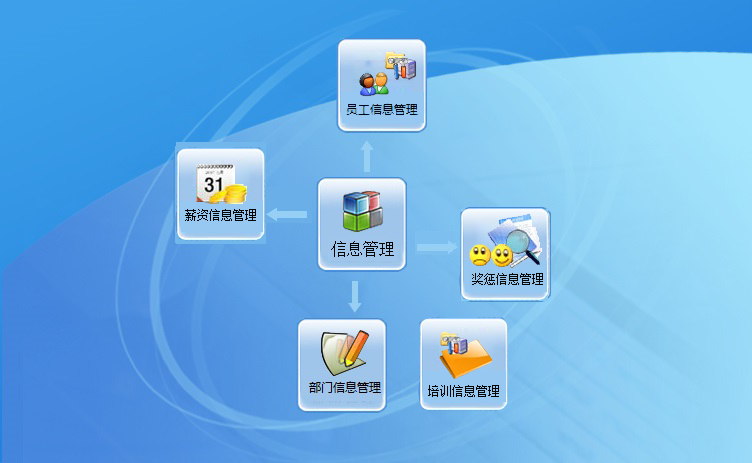
<style>
.page{position:relative;width:752px;height:463px}
.page>*{position:absolute;margin:0}
.t1{font:12px "SimSun";color:#040404}
.t2{font:16px "SimSun";color:#050505}
.t3{font:12px "SimSun";color:#080808}
.t4{font:12px "SimSun";color:#060606}
</style>
<div class="page">
<p class="t1" style="left:185px;top:209px;width:71px;height:12px">薪资信息管理</p>
<p class="t2" style="left:331px;top:241px;width:63px;height:16px">信息管理</p>
<p class="t3" style="left:472px;top:273px;width:71px;height:12px">奖惩信息管理</p>
<p class="t4" style="left:428px;top:385px;width:71px;height:12px">培训信息管理</p>
</div>
